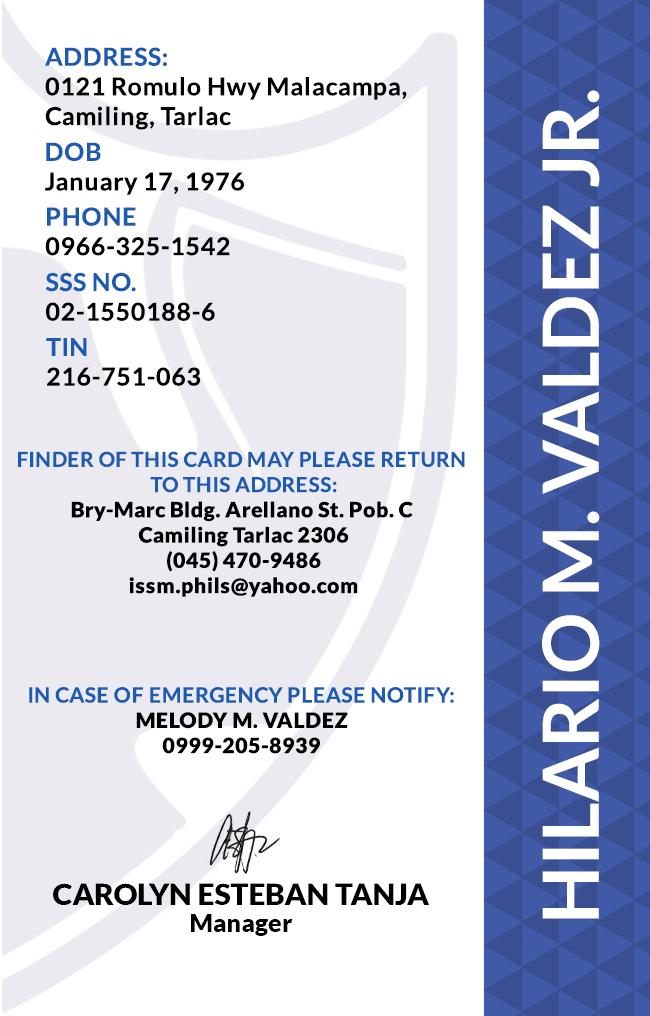
<style>
.page{position:relative;width:650px;height:1016px;background:#ffffff}
.page>*{position:absolute;margin:0}
.t1{font:24.7px/29.6px "Lato-Bold";letter-spacing:0.025em;color:#000000}
.t2{font:77.6px "Lato-Bold";color:#ffffff}
.t3{font:24.7px/29.6px "Lato-Bold";letter-spacing:0.025em}
.t4{font:21.1px "Lato-Black";letter-spacing:0.025em}
.t5{font:20.5px/25.3px "Lato-Bold";letter-spacing:0.025em;text-transform:uppercase}
.t6{font:21.1px/25.3px "Lato-Bold";letter-spacing:0.025em}
.t7{font:29.5px "Lato-Black";color:#000000}
.t8{font:25px "Lato-Black";color:#000000}
</style>
<div class="page">
<p class="t1" style="left:45px;top:47px;width:362px;height:83px">ADDRESS:<br>0121 Romulo Hwy Malacampa,<br>Camiling, Tarlac</p>
<p class="t2" style="left:542px;top:90px;width:58px;height:829px;rotate:-90deg">HILARIO M. VALDEZ JR.</p>
<p class="t3" style="left:45px;top:142px;width:199px;height:53px">DOB<br>January 17, 1976</p>
<p class="t3" style="left:45px;top:207px;width:185px;height:49px">PHONE <br>0966-325-1542</p>
<p class="t3" style="left:45px;top:272px;width:170px;height:49px">SSS NO.<br>02-1550188-6</p>
<p class="t1" style="left:46px;top:338px;width:155px;height:48px">TIN<br>216-751-063</p>
<p class="t4" style="left:18px;top:451px;width:447px;height:146px;text-align:center"><span class="t5">Finder of this card may please return <br>to this address:<br></span>Bry-Marc Bldg. Arellano St. Pob. C <br>Camiling Tarlac 2306<br>(045) 470-9486<br>issm.phils@yahoo.com</p>
<p class="t6" style="left:29px;top:687px;width:425px;height:67px;text-align:center">IN CASE OF EMERGENCY PLEASE NOTIFY:<br><span class="t4">MELODY M. VALDEZ<br>0999-205-8939</span></p>
<p class="t7" style="left:53px;top:883px;width:376px;height:22px">CAROLYN ESTEBAN TANJA</p>
<p class="t8" style="left:191px;top:914px;width:102px;height:22px">Manager</p>
</div>
